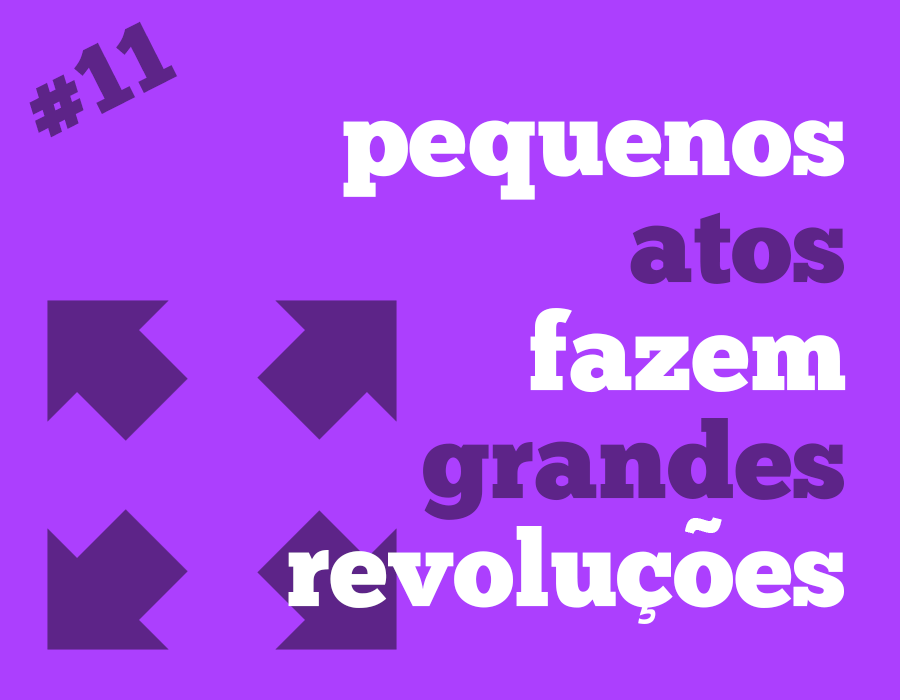
<style>
.page{position:relative;width:900px;height:700px;background:#ac3ffe}
.page>*{position:absolute;margin:0}
.t1{font:93.6px "ChunkFive-Roman";color:#5d2488}
.t2{font:106.7px/107.8px "ChunkFive-Roman";color:#ffffff}
.t3{font:106.7px/107.8px "ChunkFive-Roman";color:#5d2488}
.t4{font:84.9px "GothamUltra";color:#ffffff}
</style>
<div class="page">
<p class="t1" style="left:29px;top:21px;width:149px;height:117px;rotate:-27deg">#11</p>
<p class="t2" style="left:288px;top:119px;width:558px;height:505px;text-align:right">pequenos<br><span class="t3">atos<br></span>fazem<br><span class="t3">grandes<br></span>revoluçoes</p>
<p class="t4" style="left:685px;top:517px;width:37px;height:17px">~</p>
</div>
